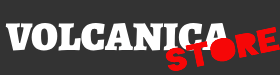
<style>
.page{position:relative;width:280px;height:75px;background:#333333}
.page>*{position:absolute;margin:0}
.t1{font:41px "AlegreyaSC-Black";color:#ffffff}
.t2{font:30.9px "Blackout-Midnight";color:#f60707;scale:1.36 1}
</style>
<div class="page">
<p class="t1" style="left:5px;top:22px;width:226px;height:29px">VOLCANICA</p>
<p class="t2" style="left:165px;top:26px;width:115px;height:45px;rotate:-12deg">STORE</p>
</div>
